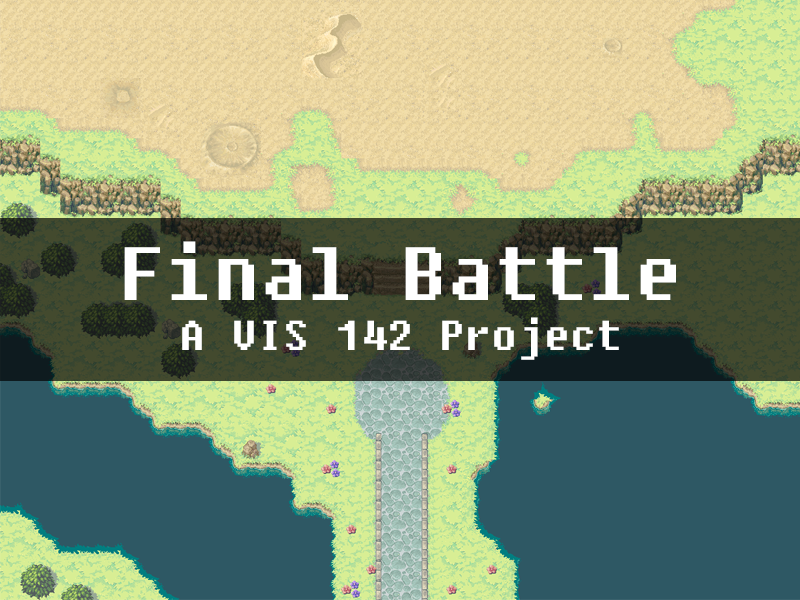
<style>
.page{position:relative;width:800px;height:600px;background:#2e5864}
.page>*{position:absolute;margin:0}
.t1{font:75px "Fixedsys";color:#ffffff}
.t2{font:41.7px "Fixedsys";color:#ffffff}
</style>
<div class="page">
<p class="t1" style="left:124px;top:241px;width:552px;height:59px">Final Battle</p>
<p class="t2" style="left:182px;top:317px;width:437px;height:43px">A VIS 142 Project</p>
</div>
